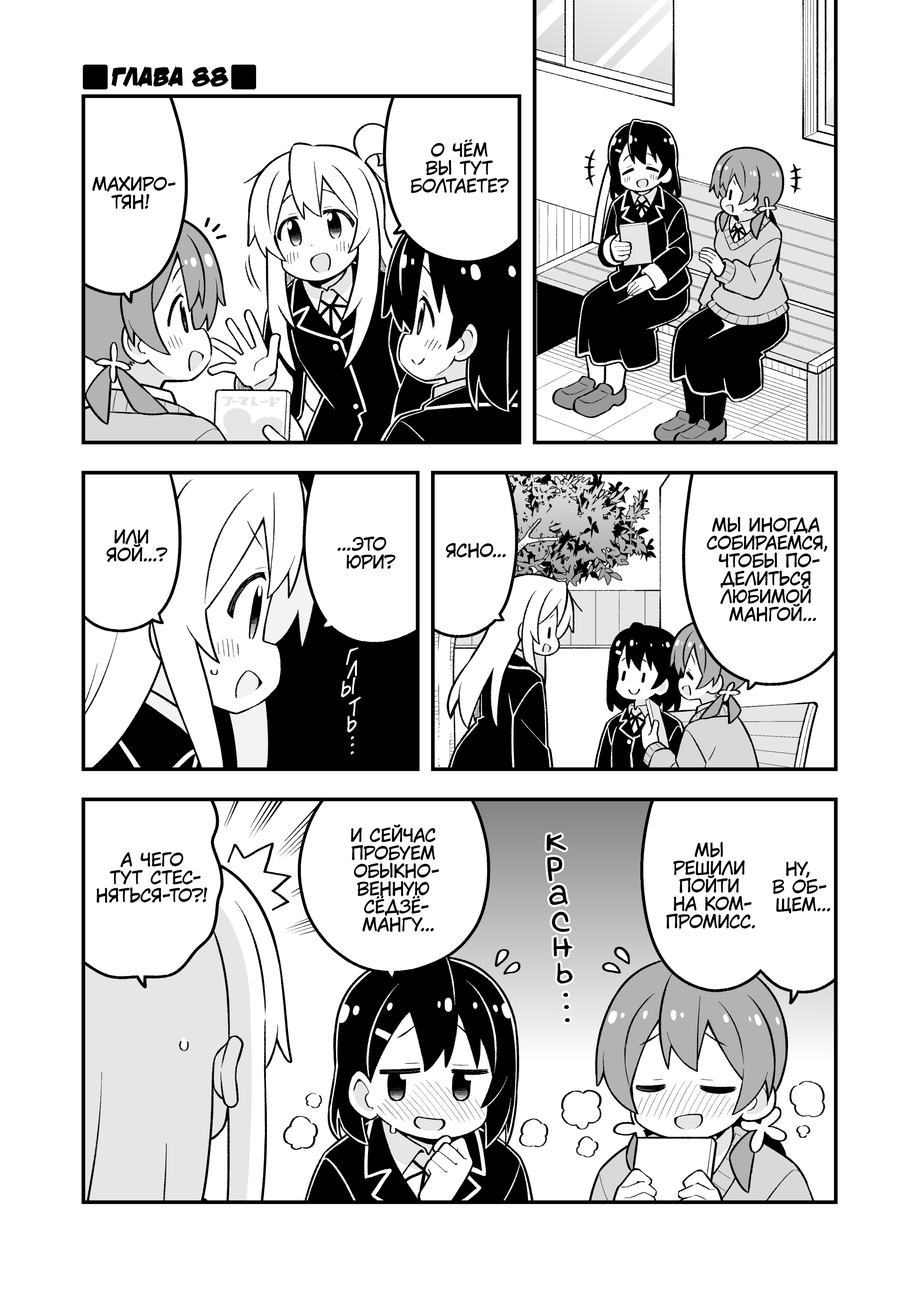
<style>
.page{position:relative;width:919px;height:1298px;background:#ffffff}
.page>*{position:absolute;margin:0}
.t1{font:26.8px "v_DamnNoisyKids";color:#000000;text-transform:uppercase}
.t2{font:17.9px "KuraiVoice2";color:#000000;text-transform:uppercase}
.t3{font:19.1px "v_CCDearDiary";color:#ffffff;text-transform:uppercase}
.t4{font:38.3px "v_Augie";color:#000000}
</style>
<div class="page">
<p class="t1" style="left:111px;top:66px;width:117px;height:21px">Глава 88</p>
<p class="t2" style="left:411px;top:139px;width:98px;height:55px;text-align:center">О чём<br>вы тут<br>болтаете?</p>
<p class="t2" style="left:92px;top:176px;width:83px;height:33px;text-align:center">Махиро-<br>тян!</p>
<p class="t2" style="left:707px;top:516px;width:120px;height:106px;text-align:center">Мы иногда<br>собираемся,<br>чтобы по-<br>делиться<br>любимой<br>мангой...</p>
<p class="t2" style="left:106px;top:529px;width:62px;height:33px;text-align:center">Или<br>яой...?</p>
<p class="t2" style="left:337px;top:536px;width:59px;height:33px;text-align:center">...Это<br>юри?</p>
<p class="t2" style="left:446px;top:542px;width:60px;height:16px">Ясно...</p>
<p class="t3" style="left:346px;top:647px;width:13px;height:18px;rotate:-3deg">г</p>
<p class="t3" style="left:347px;top:660px;width:10px;height:19px;rotate:-10deg">л</p>
<p class="t3" style="left:341px;top:677px;width:15px;height:20px;rotate:-15deg">ы</p>
<p class="t3" style="left:348px;top:696px;width:13px;height:20px;rotate:-18deg">т</p>
<p class="t3" style="left:347px;top:716px;width:10px;height:16px;rotate:-21deg">ь</p>
<p class="t3" style="left:351px;top:736px;width:3px;height:3px">.</p>
<p class="t3" style="left:351px;top:743px;width:3px;height:3px">.</p>
<p class="t3" style="left:351px;top:751px;width:3px;height:3px">.</p>
<p class="t2" style="left:351px;top:824px;width:88px;height:108px;text-align:center">И сейчас<br>пробуем<br>обыкно-<br>венную<br>сёдзё-<br>мангу...</p>
<p class="t4" style="left:547px;top:834px;width:19px;height:16px">к</p>
<p class="t2" style="left:666px;top:842px;width:89px;height:86px;text-align:center">Мы<br>решили<br>пойти<br>на ком-<br>промисс.</p>
<p class="t2" style="left:97px;top:851px;width:110px;height:52px;text-align:center">А чего<br>тут стес-<br>няться-то?!</p>
<p class="t4" style="left:547px;top:856px;width:15px;height:25px">р</p>
<p class="t2" style="left:773px;top:861px;width:57px;height:52px;text-align:center">Ну,<br>в об-<br>щем...</p>
<p class="t4" style="left:549px;top:884px;width:19px;height:21px">а</p>
<p class="t4" style="left:552px;top:911px;width:18px;height:21px">с</p>
<p class="t4" style="left:553px;top:936px;width:20px;height:21px">н</p>
<p class="t4" style="left:557px;top:962px;width:16px;height:21px">ь</p>
<p class="t4" style="left:563px;top:993px;width:5px;height:4px">.</p>
<p class="t4" style="left:564px;top:1004px;width:5px;height:5px">.</p>
<p class="t4" style="left:565px;top:1018px;width:5px;height:4px">.</p>
</div>
